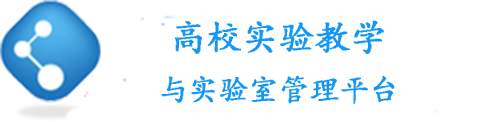
<style>
.page{position:relative;width:500px;height:122px;background:#ffffff}
.page>*{position:absolute;margin:0}
.t1{font:36px "¿¬Ìå";color:#1297f4;font-weight:bold}
.t2{font:30px "¿¬Ìå";color:#1297f4;font-weight:bold}
</style>
<div class="page">
<p class="t1" style="left:175px;top:20px;width:209px;height:34px">高校实验教学</p>
<p class="t2" style="left:161px;top:76px;width:234px;height:28px">与实验室管理平台</p>
</div>
